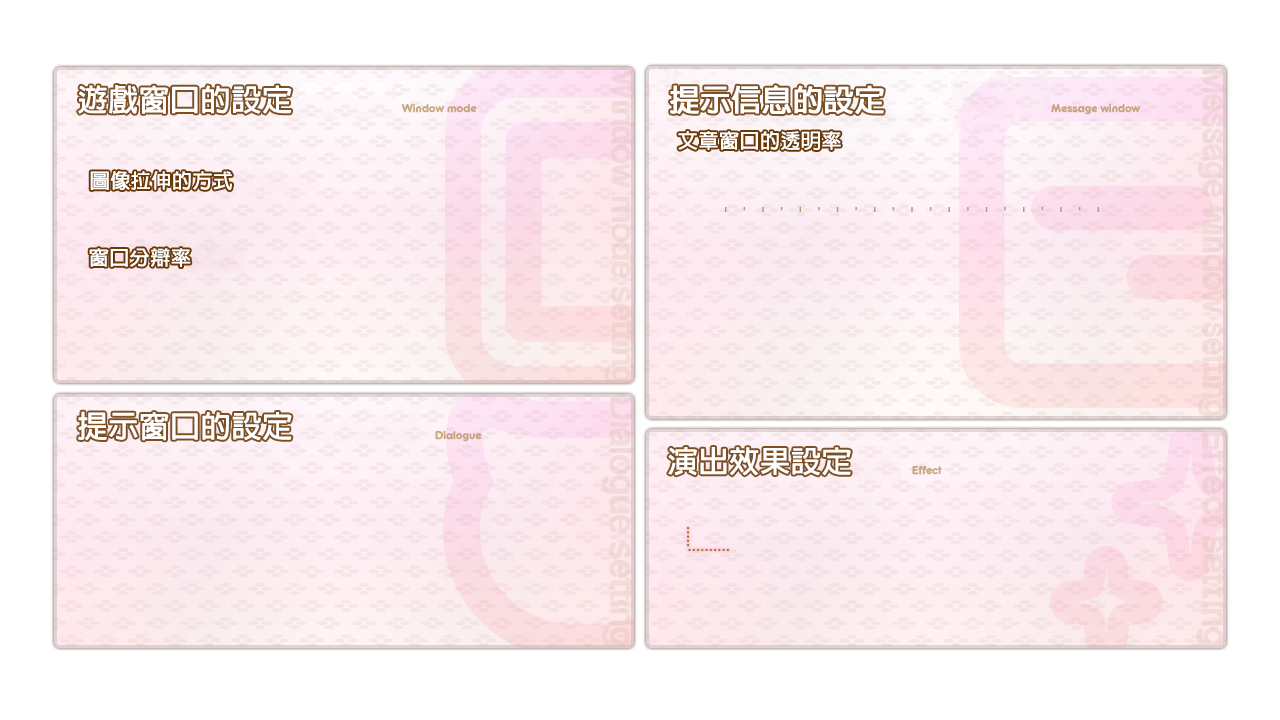
<style>
.page{position:relative;width:1280px;height:720px;background:#ffffff}
.page>*{position:absolute;margin:0}
.t1{font:30px "AdobeFanHeitiStd-Bold";color:#ffffff;font-weight:bold}
.t2{font:20px "AdobeFanHeitiStd-Bold";color:#ffffff;font-weight:bold}
</style>
<div class="page">
<p class="t1" style="left:78px;top:85px;width:214px;height:29px">遊戲窗口的設定</p>
<p class="t1" style="left:670px;top:85px;width:214px;height:29px">提示信息的設定</p>
<p class="t2" style="left:678px;top:131px;width:163px;height:19px">文章窗口的透明率</p>
<p class="t2" style="left:90px;top:171px;width:142px;height:19px">圖像拉伸的方式</p>
<p class="t2" style="left:89px;top:248px;width:102px;height:19px">窗口分辯率</p>
<p class="t1" style="left:78px;top:411px;width:214px;height:30px">提示窗口的設定</p>
<p class="t1" style="left:668px;top:447px;width:183px;height:29px">演出效果設定</p>
</div>
